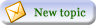
<style>
.page{position:relative;width:96px;height:25px}
.page>*{position:absolute;margin:0}
.t1{font:11px "Georgia";color:#1e6f00;font-weight:bold}
</style>
<div class="page">
<p class="t1" style="left:34px;top:7px;width:52px;height:12px">New topic</p>
</div>
